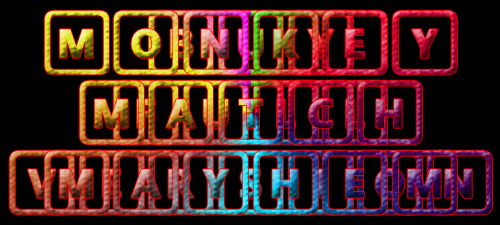
<style>
.page{position:relative;width:500px;height:225px;background:#000000}
.page>*{position:absolute;margin:0}
.t1{font:54.2px/70px "SegoeKeycaps";font-weight:bold}
</style>
<div class="page">
<p class="t1" style="left:9px;top:10px;width:483px;height:205px;text-align:center">BUY<br>FULL<br>VERSION</p>
<p class="t1" style="left:44px;top:10px;width:413px;height:205px;text-align:center">MONKEY<br>MATCH<br>MAYHEM</p>
</div>
